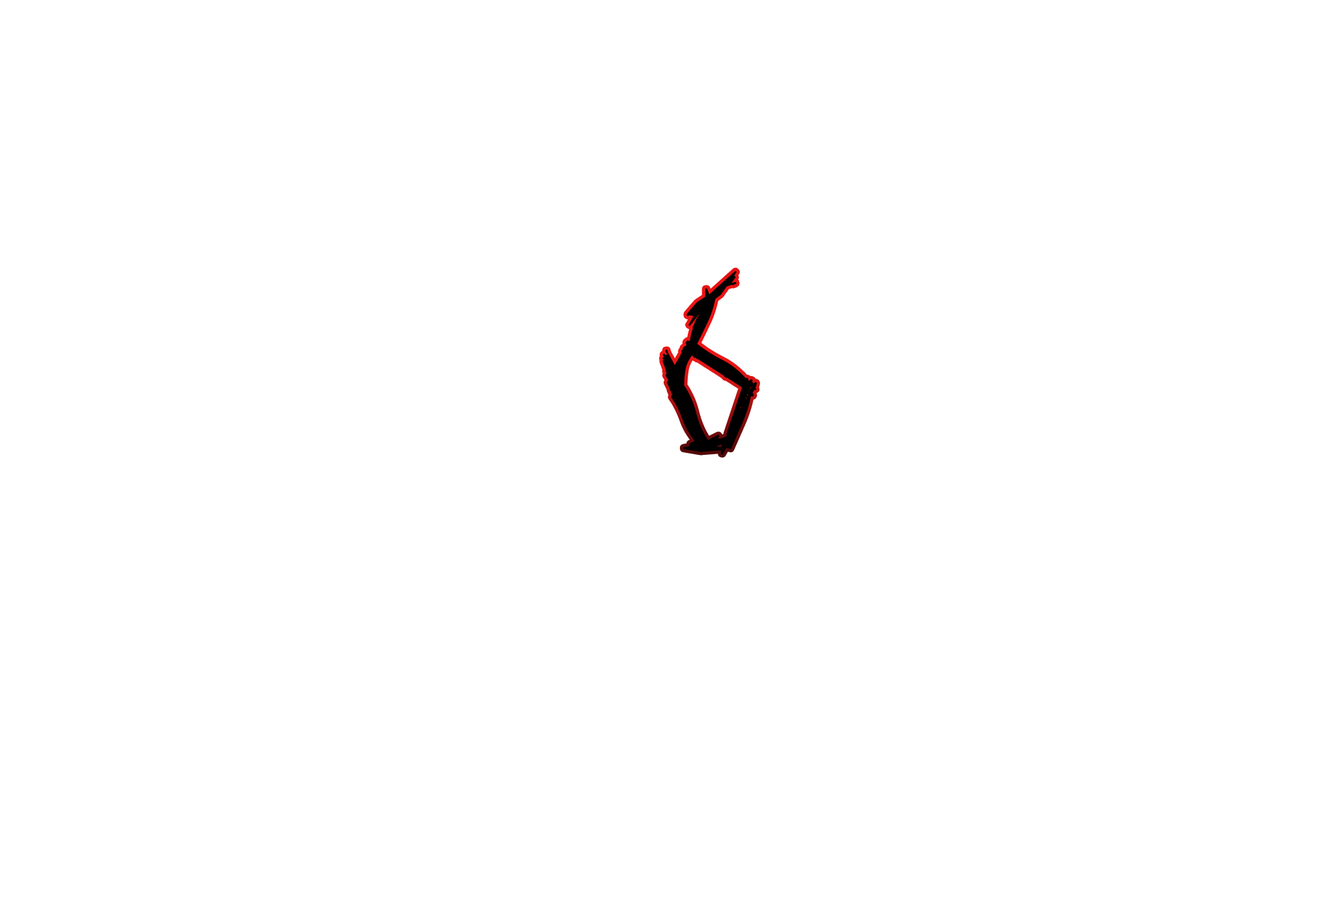
<style>
.page{position:relative;width:1328px;height:898px;background:#ffffff}
.page>*{position:absolute;margin:0}
.t1{font:199.3px "onryou";color:#000000;font-weight:bold}
</style>
<div class="page">
<p class="t1" style="left:662px;top:270px;width:95px;height:185px">6</p>
</div>
